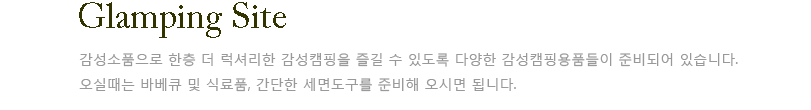
<style>
.page{position:relative;width:811px;height:110px;background:#ffffff}
.page>*{position:absolute;margin:0}
.t1{font:36px "ACaslonPro-Regular";color:#333300}
.t2{font:14px "MalgunGothicRegular";color:#999999}
</style>
<div class="page">
<p class="t1" style="left:79px;top:2px;width:207px;height:36px">Glamping Site</p>
<p class="t2" style="left:79px;top:53px;width:659px;height:39px">감성소품으로 한층 더 럭셔리한 감성캠핑을 즐길 수 있도록 다양한 감성캠핑용품들이 준비되어 있습니다.<br>오실때는 바베큐 및 식료품, 간단한 세면도구를 준비해 오시면 됩니다.</p>
</div>
